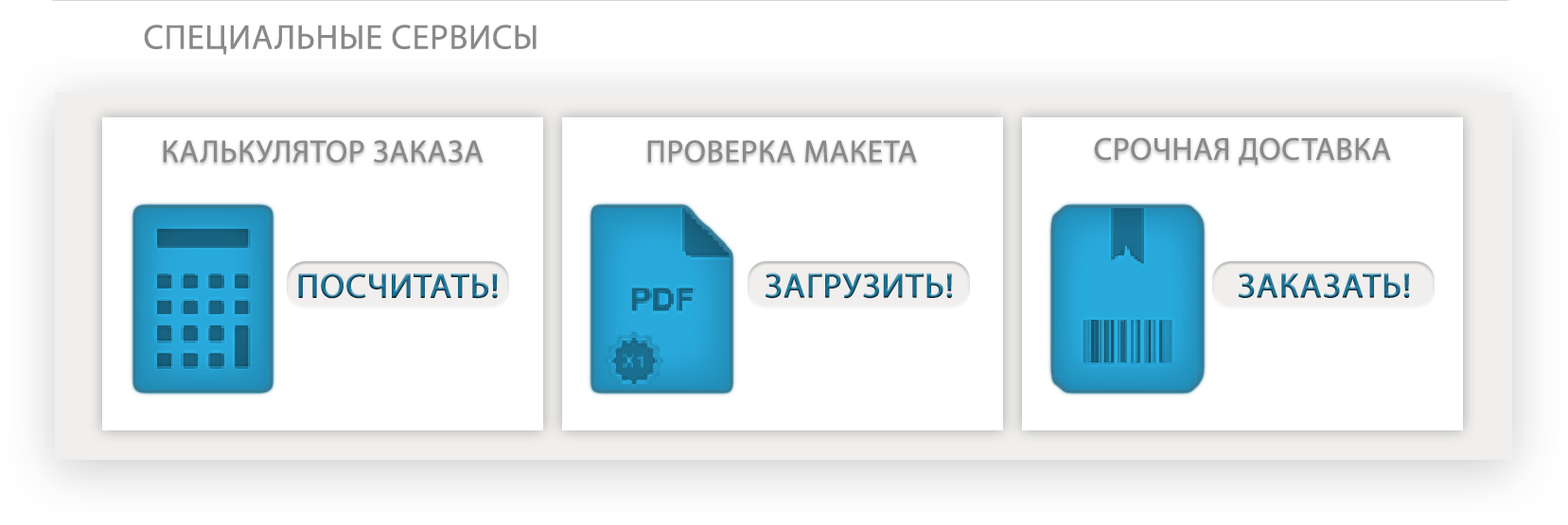
<style>
.page{position:relative;width:1568px;height:525px;background:#ffffff}
.page>*{position:absolute;margin:0}
.t1{font:34.7px "MyriadPro-Regular";letter-spacing:0.02em;color:#8b8987}
.t2{font:31.8px "MyriadPro-Regular";letter-spacing:0.02em;color:#8b8987}
.t3{font:34.7px "MyriadPro-Regular";letter-spacing:0.02em;font-weight:bold}
</style>
<div class="page">
<p class="t1" style="left:144px;top:25px;width:393px;height:30px">СПЕЦИАЛЬНЫЕ СЕРВИСЫ</p>
<p class="t2" style="left:1094px;top:137px;width:297px;height:29px">СРОЧНАЯ ДОСТАВКА</p>
<p class="t2" style="left:163px;top:140px;width:321px;height:23px">КАЛЬКУЛЯТОР ЗАКАЗА</p>
<p class="t2" style="left:647px;top:140px;width:270px;height:23px">ПРОВЕРКА МАКЕТА</p>
<p class="t3" style="left:298px;top:273px;width:200px;height:26px">ПОСЧИТАТЬ!</p>
<p class="t3" style="left:765px;top:273px;width:188px;height:26px">ЗАГРУЗИТЬ!</p>
<p class="t3" style="left:1238px;top:273px;width:172px;height:25px">ЗАКАЗАТЬ!</p>
</div>
